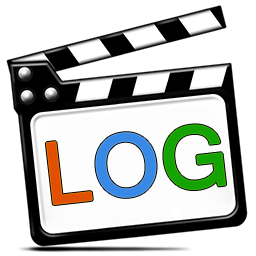
<style>
.page{position:relative;width:256px;height:256px;background:#ffffff}
.page>*{position:absolute;margin:0}
.t1{font:85px "MicrosoftSansSerif";color:#e14f02;font-weight:bold}
.t2{font:85px "MicrosoftSansSerif";color:#3888e5;font-weight:bold}
.t3{font:85px "MicrosoftSansSerif";color:#15a203;font-weight:bold}
</style>
<div class="page">
<p class="t1" style="left:46px;top:124px;width:180px;height:81px;rotate:-6deg">L<span class="t2">O</span><span class="t3">G</span></p>
</div>
